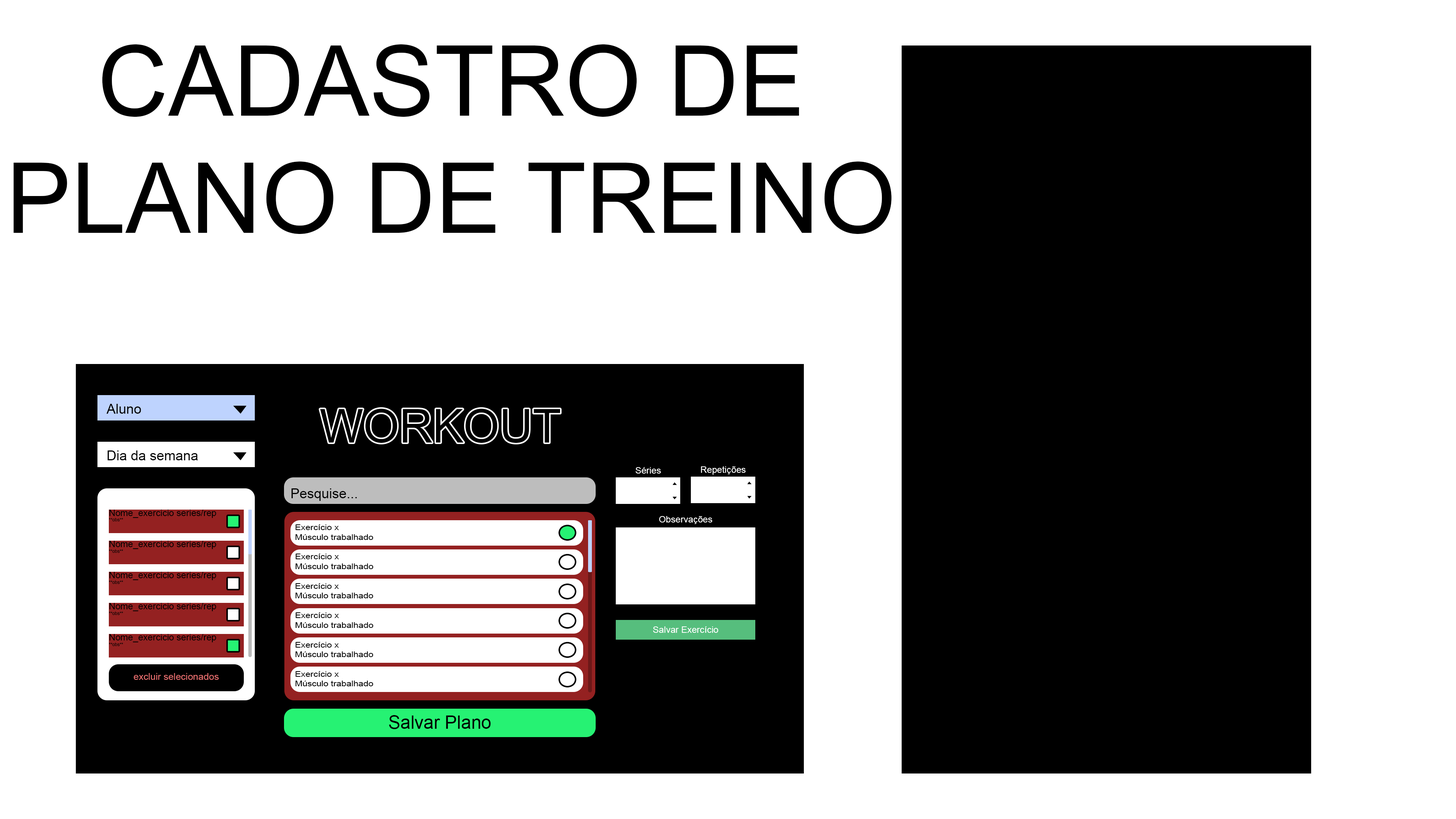
<style>
.page{position:relative;width:1456px;height:819px;background:#ffffff}
.page>*{position:absolute;margin:0}
.t1{font:97.8px "ArialMT";color:#000000}
.t2{font:13.6px "ArialMT";color:#000000}
.t3{font:9.1px "ArialMT";color:#ffffff}
.t4{font:9.1px "ArialMT";color:#000000}
.t5{font:4.5px "ArialMT";color:#000000}
.t6{font:8px "ArialMT";color:#000000;scale:1.12 1}
.t7{font:9.5px "ArialMT";color:#e76e6e}
.t8{font:18.2px "ArialMT";color:#000000}
</style>
<div class="page">
<p class="t1" style="left:13px;top:44px;width:879px;height:190px;text-align:center">CADASTRO DE PLANO DE TREINO</p>
<p class="t2" style="left:107px;top:404px;width:34px;height:10px">Aluno</p>
<p class="t2" style="left:107px;top:450px;width:91px;height:10px">Dia da semana</p>
<p class="t3" style="left:635px;top:467px;width:26px;height:7px">Séries</p>
<p class="t3" style="left:701px;top:466px;width:45px;height:9px">Repetições</p>
<p class="t2" style="left:291px;top:488px;width:66px;height:13px">Pesquise...</p>
<p class="t4" style="left:109px;top:510px;width:107px;height:11px">Nome_exercicio series/rep<br><span class="t5">**obs**</span></p>
<p class="t3" style="left:659px;top:516px;width:53px;height:8px">Observações</p>
<p class="t6" style="left:295px;top:524px;width:78px;height:16px">Exercício x<br>Músculo trabalhado</p>
<p class="t4" style="left:109px;top:541px;width:107px;height:12px">Nome_exercicio series/rep<br><span class="t5">**obs**</span></p>
<p class="t6" style="left:295px;top:554px;width:78px;height:15px">Exercício x<br>Músculo trabalhado</p>
<p class="t4" style="left:109px;top:572px;width:107px;height:12px">Nome_exercicio series/rep<br><span class="t5">**obs**</span></p>
<p class="t6" style="left:295px;top:583px;width:78px;height:15px">Exercício x<br>Músculo trabalhado</p>
<p class="t4" style="left:109px;top:603px;width:107px;height:12px">Nome_exercicio series/rep<br><span class="t5">**obs**</span></p>
<p class="t6" style="left:295px;top:612px;width:78px;height:16px">Exercício x<br>Músculo trabalhado</p>
<p class="t3" style="left:653px;top:626px;width:66px;height:7px">Salvar Exercício</p>
<p class="t4" style="left:109px;top:634px;width:107px;height:12px">Nome_exercicio series/rep<br><span class="t5">**obs**</span></p>
<p class="t6" style="left:295px;top:642px;width:78px;height:15px">Exercício x<br>Músculo trabalhado</p>
<p class="t7" style="left:133px;top:673px;width:86px;height:7px">excluir selecionados</p>
<p class="t6" style="left:295px;top:671px;width:78px;height:15px">Exercício x<br>Músculo trabalhado</p>
<p class="t8" style="left:389px;top:715px;width:102px;height:14px">Salvar Plano</p>
</div>
